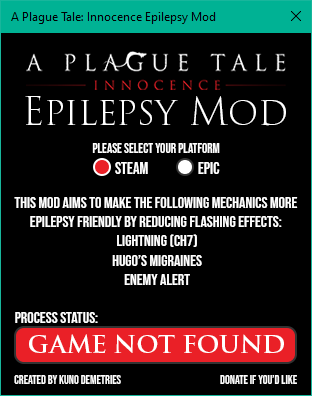
<style>
.page{position:relative;width:312px;height:396px;background:#000000}
.page>*{position:absolute;margin:0}
.t1{font:37.9px "TrajanPro3-Light";color:#ffffff}
.t2{font:13.3px "BebasNeue-Regular";color:#ffffff}
.t3{font:16.3px "BebasNeue-Regular";color:#ffffff}
.t4{font:16px "BebasNeue-Regular";color:#ffffff}
.t5{font:24px "TrajanPro3-Semibold";color:#ffffff}
.t6{font:12px "BebasNeue-Regular";color:#ffffff}
</style>
<div class="page">
<p class="t1" style="left:25px;top:96px;width:261px;height:30px">Epilepsy Mod</p>
<p class="t2" style="left:92px;top:143px;width:128px;height:10px">please select your platform</p>
<p class="t3" style="left:115px;top:162px;width:33px;height:12px">STEAm</p>
<p class="t3" style="left:198px;top:162px;width:22px;height:12px">EPic</p>
<p class="t4" style="left:14px;top:197px;width:284px;height:88px;text-align:center">THis mod aims to make the Following mechanics more <br>epilepsy friendly By reducing flashing effects: <br>Lightning (Ch7)<br>Hugo’s MIgraines<br>enemy alert</p>
<p class="t4" style="left:15px;top:312px;width:83px;height:11px">Process Status:</p>
<p class="t5" style="left:29px;top:334px;width:255px;height:20px">GAME NOT FOUND</p>
<p class="t6" style="left:14px;top:375px;width:107px;height:9px">CReated by Kuno demetries</p>
<p class="t6" style="left:220px;top:375px;width:77px;height:9px">Donate if you’d like</p>
</div>
